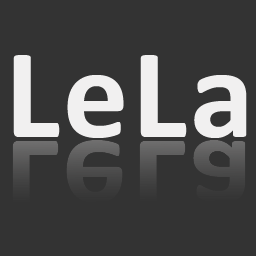
<style>
.page{position:relative;width:256px;height:256px;background:#333333}
.page>*{position:absolute;margin:0}
.t1{font:130px "Calibri-Bold";letter-spacing:0.025em;color:#f1f0f0}
</style>
<div class="page">
<p class="t1" style="left:13px;top:55px;width:234px;height:83px">LeLa</p>
</div>
